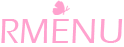
<style>
.page{position:relative;width:124px;height:47px;background:#ffffff}
.page>*{position:absolute;margin:0}
.t1{font:36px "ErasITC-Medium";color:#ffa2ce}
</style>
<div class="page">
<p class="t1" style="left:1px;top:19px;width:122px;height:24px">RMENU</p>
</div>
